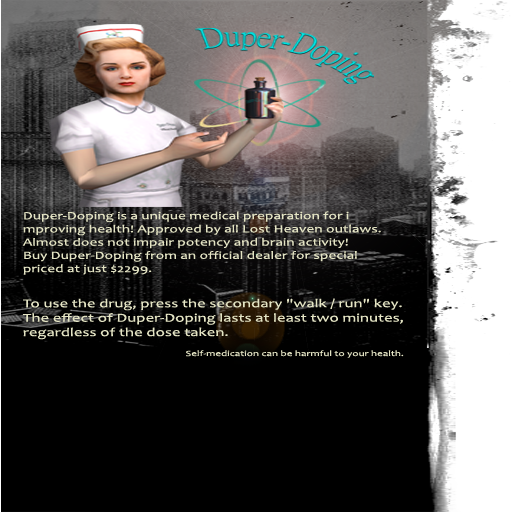
<style>
.page{position:relative;width:512px;height:512px;background:#000000}
.page>*{position:absolute;margin:0}
.t1{font:11px "Candara";color:#e4e4c4;scale:1.4 1}
.t2{font:12px "Candara";color:#e4e4c4;scale:1.4 1}
.t3{font:8px "Candara";color:#e4e4c4;scale:1.4 1}
</style>
<div class="page">
<p class="t1" style="left:22px;top:211px;width:359px;height:64px">Duper-Doping is a unique medical preparation for i<br>mproving health! Approved by all Lost Heaven outlaws. <br>Almost does not impair potency and brain activity! <br>Buy Duper-Doping from an official dealer for special <br>priced at just $2299.</p>
<p class="t2" style="left:23px;top:298px;width:380px;height:42px">To use the drug, press the secondary "walk / run" key. <br>The effect of Duper-Doping lasts at least two minutes, <br>regardless of the dose taken.</p>
<p class="t3" style="left:186px;top:350px;width:218px;height:8px">Self-medication can be harmful to your health.</p>
</div>
